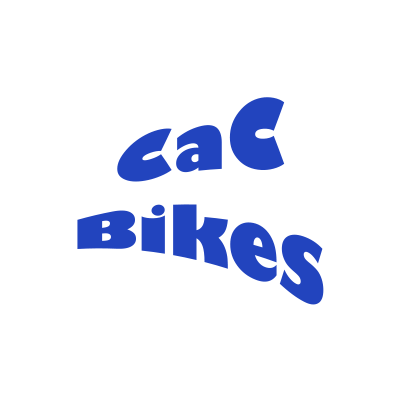
<style>
.page{position:relative;width:400px;height:400px;background:#ffffff}
.page>*{position:absolute;margin:0}
.t1{font:75px "GillSans-UltraBold";color:#2244be}
</style>
<div class="page">
<p class="t1" style="left:77px;top:97px;width:247px;height:208px;text-align:center">CaC<br>Bikes</p>
</div>
